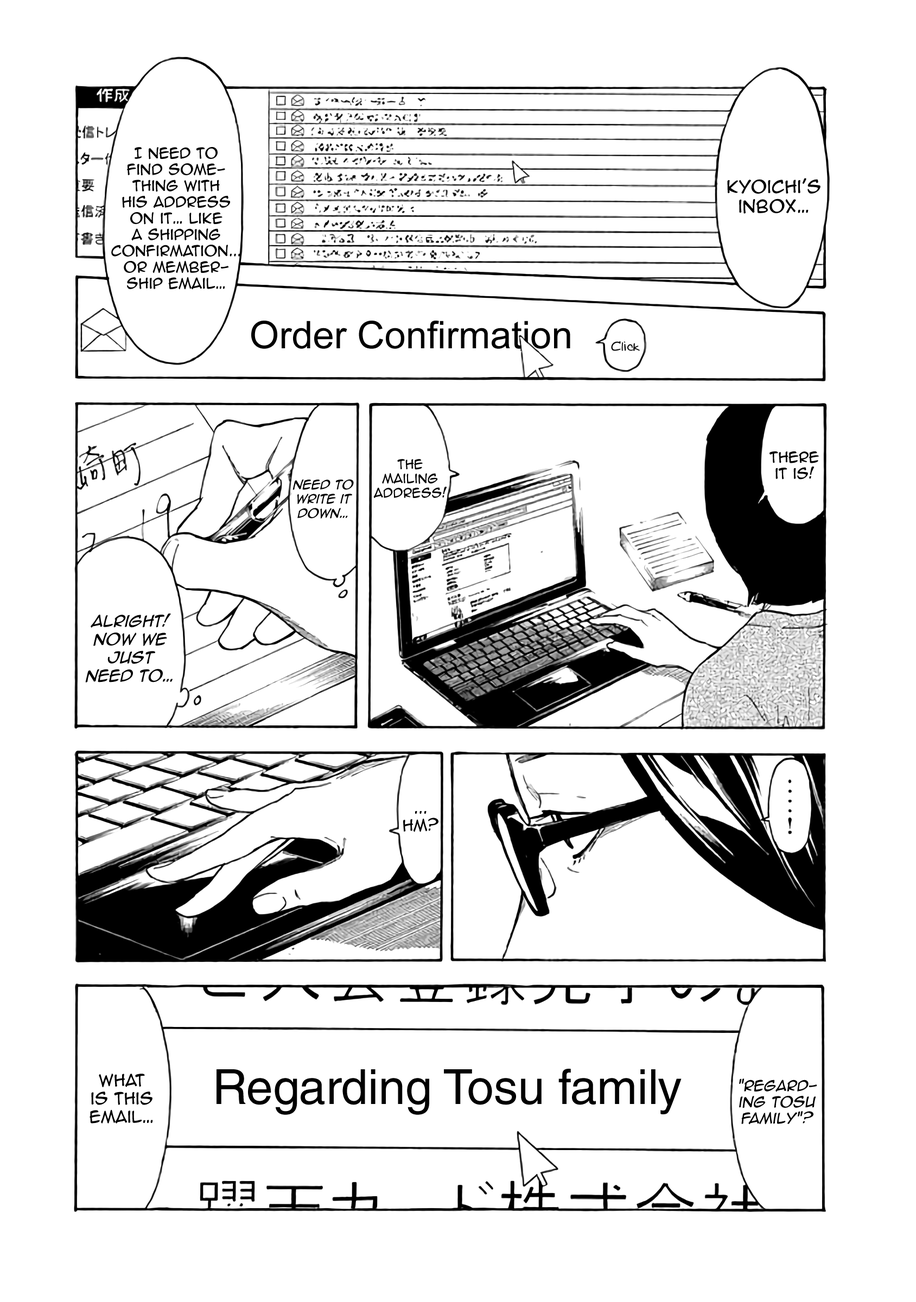
<style>
.page{position:relative;width:916px;height:1302px;background:#ffffff}
.page>*{position:absolute;margin:0}
.t1{font:13.6px "AnimeAce2.0BB";color:#000000}
.t2{font:16.3px "AnimeAce2.0BB";color:#000000}
.t3{font:38px "ArialMT";color:#000000}
.t4{font:12.5px "Augie";color:#000000}
.t5{font:11.9px "AnimeAce2.0BB";color:#000000}
.t6{font:11.9px "AnimeAce2.0BB-Italic";color:#000000}
.t7{font:15.2px "AnimeAce2.0BB-Italic";color:#000000}
.t8{font:14.6px "AnimeAce2.0BB";color:#000000}
.t9{font:15.2px "AnimeAce2.0BB";color:#000000}
.t10{font:48.3px "HelveticaLTStd-Roman";color:#000000}
.t11{font:13.6px "AnimeAce2.0BB";color:#000000;font-style:italic}
</style>
<div class="page">
<p class="t1" style="left:111px;top:147px;width:129px;height:143px;text-align:center">I need to <br>find some-<br>thing with <br>his address <br>on it… like  <br>a shipping <br>confirmation... <br>or member-<br>ship email…</p>
<p class="t2" style="left:727px;top:178px;width:93px;height:36px;text-align:center">kyoichi's inbox…</p>
<p class="t3" style="left:251px;top:321px;width:319px;height:28px">Order Confirmation</p>
<p class="t4" style="left:611px;top:341px;width:29px;height:10px">Click</p>
<p class="t5" style="left:373px;top:459px;width:74px;height:39px;text-align:center">the <br>mailing<br>Address!</p>
<p class="t1" style="left:769px;top:451px;width:50px;height:29px;text-align:center">There <br>it is!</p>
<p class="t6" style="left:292px;top:479px;width:62px;height:40px;text-align:center">need to Write it <br>down…</p>
<p class="t7" style="left:85px;top:613px;width:88px;height:70px;text-align:center">Alright! <br>Now we <br>just <br>need to…</p>
<p class="t8" style="left:403px;top:811px;width:35px;height:21px;text-align:center">...<br>Hm?</p>
<p class="t9" style="left:90px;top:1074px;width:63px;height:50px;text-align:center">What <br>is this email…</p>
<p class="t10" style="left:216px;top:1069px;width:465px;height:46px">Regarding Tosu family</p>
<p class="t11" style="left:739px;top:1079px;width:78px;height:46px;text-align:center">"Regarding Tosu family"?</p>
</div>
